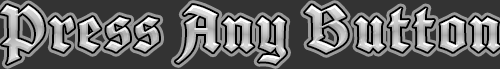
<style>
.page{position:relative;width:500px;height:69px;background:#333333}
.page>*{position:absolute;margin:0}
.t1{font:70px "Cabazon";letter-spacing:0.05em}
</style>
<div class="page">
<p class="t1" style="left:0px;top:5px;width:501px;height:59px">Press Any Button</p>
</div>
